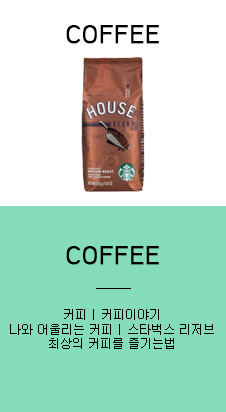
<style>
.page{position:relative;width:226px;height:412px;background:#84dcb8}
.page>*{position:absolute;margin:0}
.t1{font:24px "HCRDotum";color:#000000;font-weight:bold}
.t2{font:12px "New-Gulim";color:#000000}
.t3{font:12px/120px "New-Gulim";color:#000000}
.t4{font:12px/6px "New-Gulim";color:#000000}
</style>
<div class="page">
<p class="t1" style="left:66px;top:25px;width:93px;height:19px">COFFEE</p>
<p class="t1" style="left:66px;top:246px;width:93px;height:19px">COFFEE</p>
<p class="t2" style="left:10px;top:309px;width:204px;height:40px;text-align:center"><span class="t3">커피 | 커피</span><span class="t4">이야</span>기<br>나와 어울리는 커피 | 스타벅스 리저브<br>최상의 커피를 즐기는법</p>
</div>
